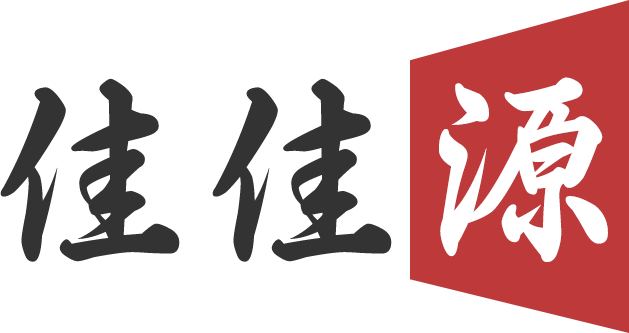
<style>
.page{position:relative;width:629px;height:333px;background:#ffffff}
.page>*{position:absolute;margin:0}
.t1{font:212px "SJxingkai-C-Regular";color:#333333}
.t2{font:212px "SJxingkai-C-Regular";color:#ffffff}
</style>
<div class="page">
<p class="t1" style="left:0px;top:77px;width:608px;height:185px">佳佳<span class="t2">源</span></p>
</div>
